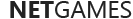
<style>
.page{position:relative;width:133px;height:19px;background:#ffffff}
.page>*{position:absolute;margin:0}
.t1{font:24px "MicrosoftTaiLe";color:#222222}
.t2{font:24px "MicrosoftTaiLe-Bold";color:#222222}
</style>
<div class="page">
<p class="t1" style="left:10px;top:1px;width:122px;height:17px"><span class="t2">NET</span>GAMES</p>
</div>
